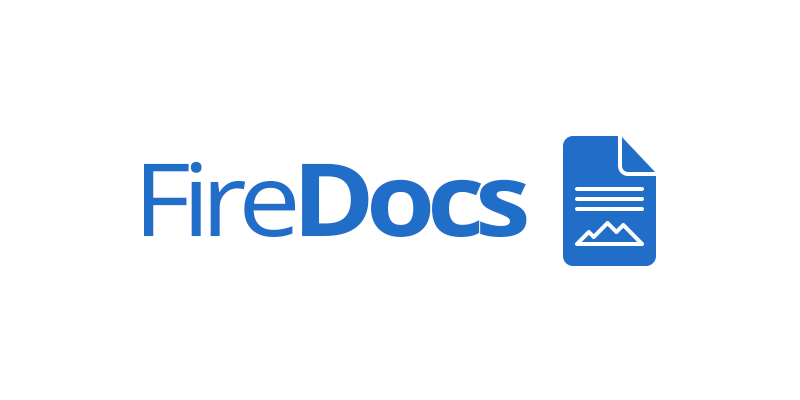
<style>
.page{position:relative;width:800px;height:400px;background:#ffffff}
.page>*{position:absolute;margin:0}
.t1{font:100.9px "OpenSans";letter-spacing:-0.08em;color:#216ec9;scale:1.11 1}
.t2{font:100.9px "OpenSans-Bold";letter-spacing:-0.08em;color:#216ec9;scale:1.11 1}
</style>
<div class="page">
<p class="t1" style="left:144px;top:161px;width:383px;height:76px">Fire<span class="t2">Docs</span></p>
</div>
